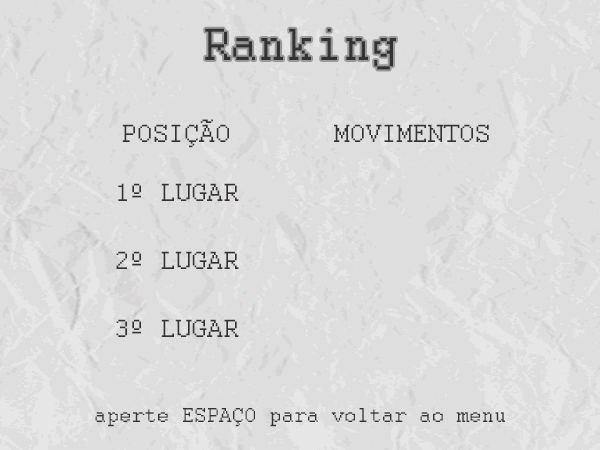
<style>
.page{position:relative;width:600px;height:450px;background:#dedede}
.page>*{position:absolute;margin:0}
.t1{font:50px "Courier";color:#333333}
.t2{font:27.8px "Courier";color:#333333}
.t3{font:22.2px "Courier";color:#333333}
</style>
<div class="page">
<p class="t1" style="left:205px;top:28px;width:191px;height:42px">Ranking</p>
<p class="t2" style="left:122px;top:119px;width:107px;height:29px">POSIÇÃO</p>
<p class="t2" style="left:334px;top:124px;width:155px;height:18px">MOVIMENTOS</p>
<p class="t2" style="left:118px;top:183px;width:121px;height:18px">1º LUGAR</p>
<p class="t2" style="left:116px;top:251px;width:123px;height:18px">2º LUGAR</p>
<p class="t2" style="left:116px;top:319px;width:123px;height:18px">3º LUGAR</p>
<p class="t3" style="left:95px;top:408px;width:410px;height:19px">aperte ESPAÇO para voltar ao menu</p>
</div>
